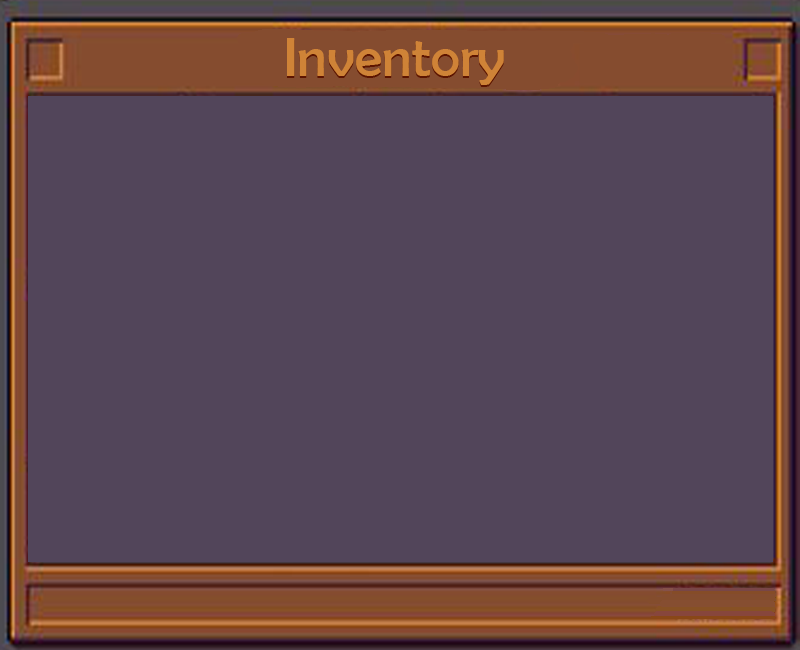
<style>
.page{position:relative;width:800px;height:650px;background:#52455a}
.page>*{position:absolute;margin:0}
.t1{font:56.2px "BerlinSansFB-Reg";color:#cf8337}
</style>
<div class="page">
<p class="t1" style="left:287px;top:38px;width:217px;height:47px">Inventory</p>
</div>
